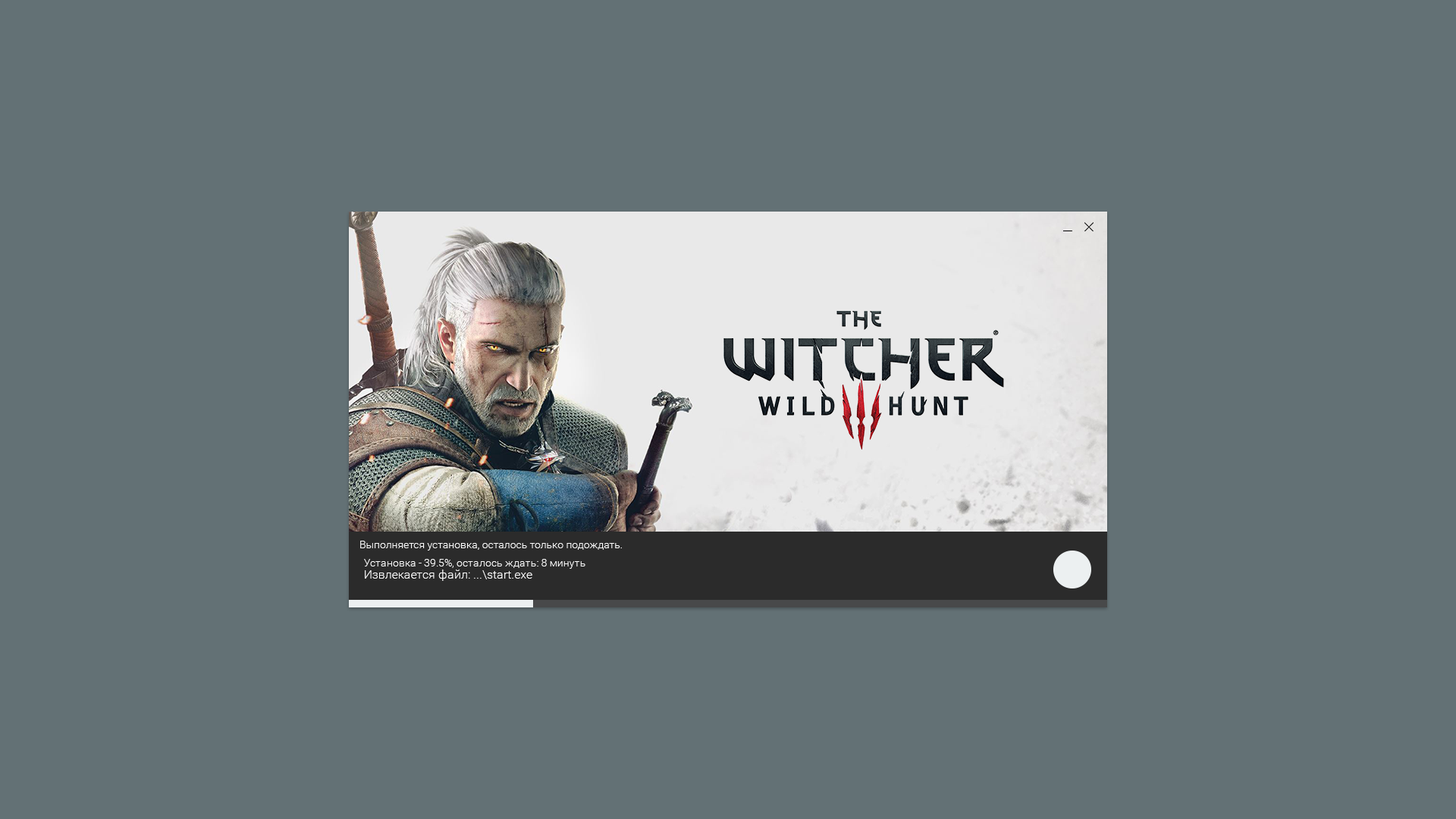
<style>
.page{position:relative;width:1456px;height:819px;background:#637175}
.page>*{position:absolute;margin:0}
.t1{font:10.6px "Roboto-Light";color:#ffffff}
.t2{font:12.1px "Roboto-Light";color:#ffffff}
</style>
<div class="page">
<p class="t1" style="left:360px;top:541px;width:262px;height:10px">Выполняется установка, осталось только подождать.</p>
<p class="t1" style="left:364px;top:559px;width:221px;height:10px">Установка - 39.5%, осталось ждать: 8 минуть</p>
<p class="t2" style="left:365px;top:570px;width:167px;height:11px">Извлекается файл: ...\start.exe</p>
</div>
